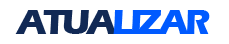
<style>
.page{position:relative;width:229px;height:44px;background:#ffffff}
.page>*{position:absolute;margin:0}
.t1{font:36px "ErasITC-Bold";letter-spacing:-0.1em;color:#005aff}
.t2{font:36px "ErasITC-Bold";letter-spacing:-0.1em;color:#112955}
</style>
<div class="page">
<p class="t1" style="left:15px;top:10px;width:195px;height:24px"><span class="t2">ATUA</span>LIZAR</p>
</div>
